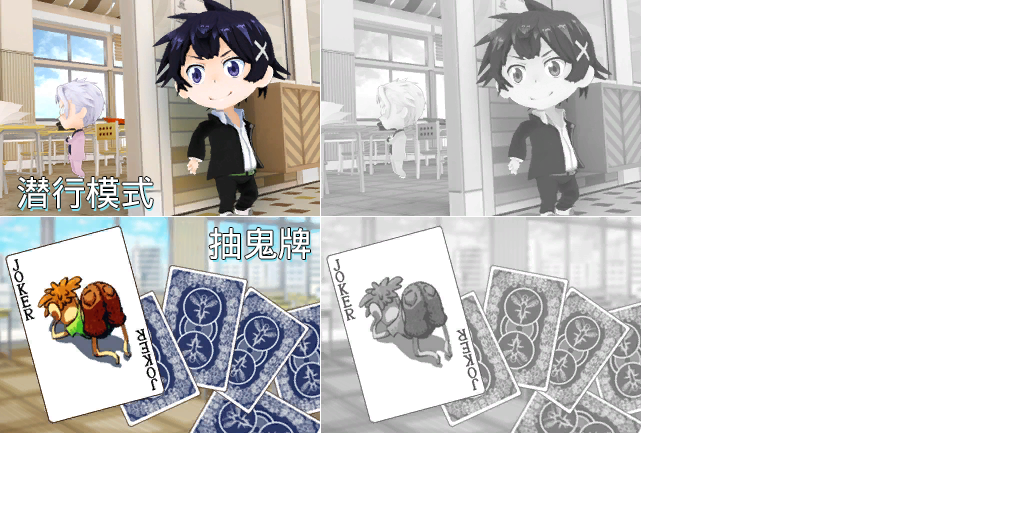
<style>
.page{position:relative;width:1024px;height:512px;background:#ffffff}
.page>*{position:absolute;margin:0}
.t1{font:34.7px "WenQuanYiMicroHeiMono";letter-spacing:-0.005em;color:#ffffff}
</style>
<div class="page">
<p class="t1" style="left:17px;top:177px;width:136px;height:32px">潜行模式</p>
<p class="t1" style="left:209px;top:227px;width:101px;height:32px">抽鬼牌</p>
</div>
